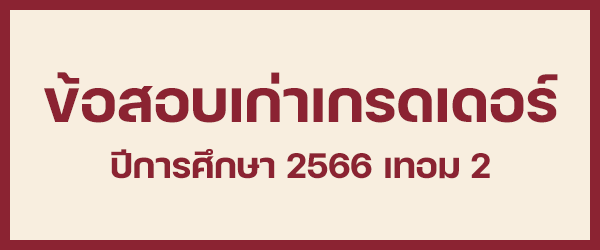
<style>
.page{position:relative;width:600px;height:250px;background:#f8eedf}
.page>*{position:absolute;margin:0}
.t1{font:80px "FCMinimalBold";color:#8b2332}
.t2{font:48px "FCMinimalBold";color:#8b2332}
</style>
<div class="page">
<p class="t1" style="left:44px;top:72px;width:514px;height:51px">ข้อสอบเก่าเกรดเดอร์</p>
<p class="t2" style="left:111px;top:148px;width:379px;height:31px">ปีการศึกษา 2566 เทอม 2</p>
</div>
